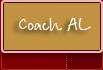
<style>
.page{position:relative;width:103px;height:70px;background:#c19242}
.page>*{position:absolute;margin:0}
.t1{font:18px "BetinaScript";color:#fefefe}
</style>
<div class="page">
<p class="t1" style="left:19px;top:18px;width:72px;height:13px">Coach AL</p>
</div>
